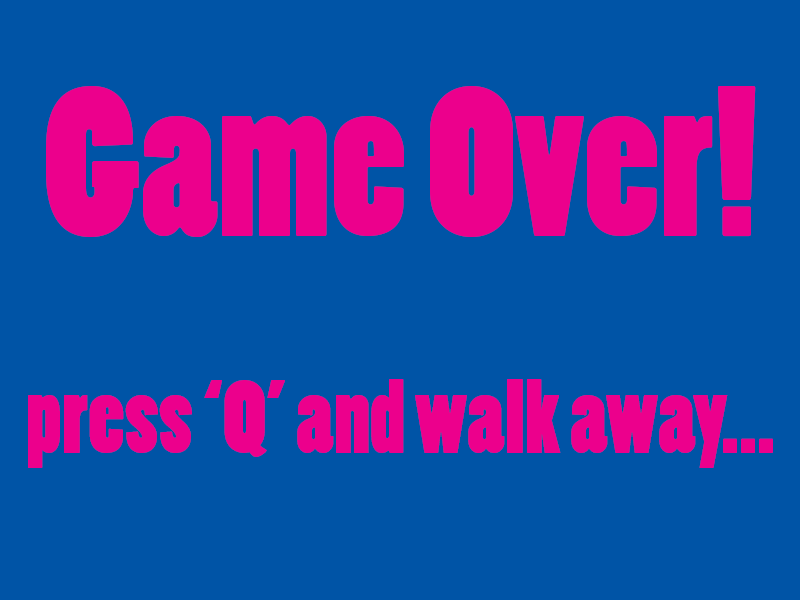
<style>
.page{position:relative;width:800px;height:600px;background:#0054a6}
.page>*{position:absolute;margin:0}
.t1{font:97px/216.7px "PoplarStd";color:#ec008c}
.t2{font:200px/216.7px "PoplarStd";color:#ec008c}
</style>
<div class="page">
<p class="t1" style="left:28px;top:86px;width:745px;height:382px;text-align:center"><span class="t2">Game Over!<br></span>press ‘Q’ and walk away...</p>
</div>
